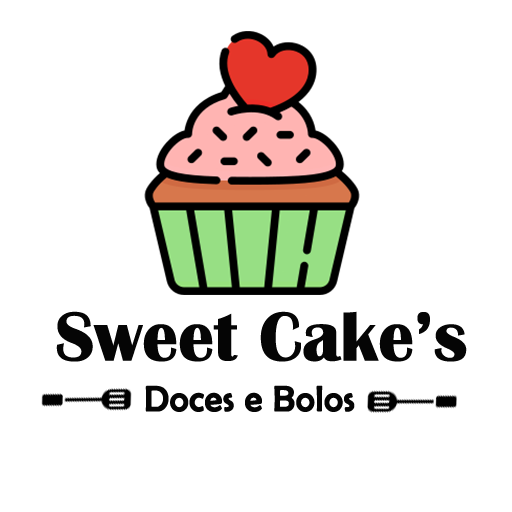
<style>
.page{position:relative;width:512px;height:512px;background:#ffffff}
.page>*{position:absolute;margin:0}
.t1{font:71.8px "BritannicBold";color:#050505}
.t2{font:36px "BerlinSansFB-Reg";color:#050505;font-weight:bold}
</style>
<div class="page">
<p class="t1" style="left:56px;top:311px;width:411px;height:51px">Sweet Cake’s</p>
<p class="t2" style="left:145px;top:385px;width:210px;height:27px">Doces e Bolos</p>
</div>
